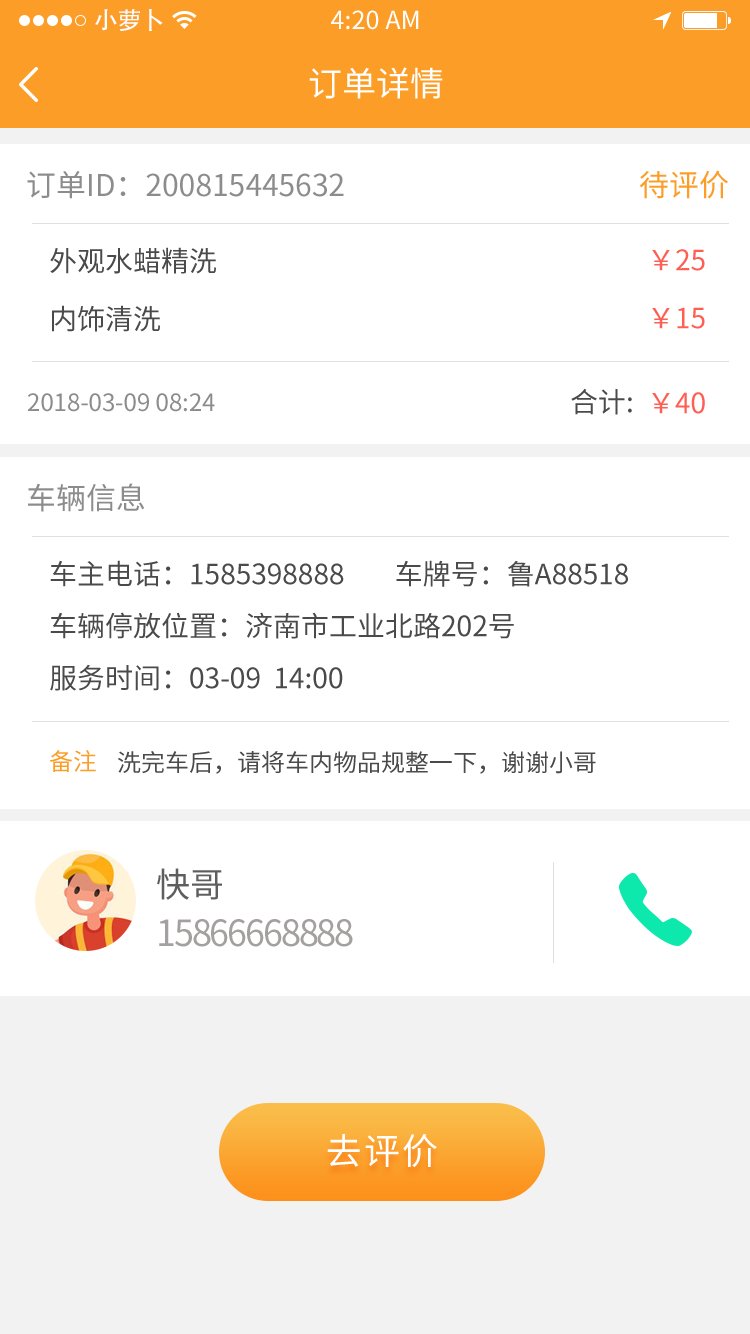
<style>
.page{position:relative;width:750px;height:1334px;background:#ffffff}
.page>*{position:absolute;margin:0}
.t1{font:24px "AdobeHeitiStd-Regular";color:#ffffff}
.t2{font:25px "SourceHanSansCN-Regular";color:#ffffff}
.t3{font:34px "SourceHanSansCN-Regular";color:#ffffff}
.t4{font:30px "SourceHanSansCN-Regular";color:#8c8c8c}
.t5{font:30px "SourceHanSansCN-Regular";color:#fb9d27}
.t6{font:28px/58px "SourceHanSansCN-Regular";color:#4a4a4a}
.t7{font:28px/58px "SourceHanSansCN-Regular";color:#ff5f52}
.t8{font:28px "SourceHanSansCN-Regular";color:#4a4a4a}
.t9{font:24px "SourceHanSansCN-Regular";color:#8c8c8c}
.t10{font:28px "SourceHanSansCN-Regular";color:#ff5f52}
.t11{font:28px/52px "SourceHanSansCN-Regular";color:#4a4a4a}
.t12{font:24px "SourceHanSansCN-Regular";color:#fb9d27}
.t13{font:24px "SourceHanSansCN-Regular";color:#4a4a4a}
.t14{font:34px "SourceHanSansCN-Regular";color:#5e5e5e}
.t15{font:36px "SourceHanSansCN-Regular";letter-spacing:-0.06em;color:#a5a0a0}
.t16{font:36px "SourceHanSansCN-Regular";letter-spacing:0.06em;color:#ffffff}
</style>
<div class="page">
<p class="t1" style="left:95px;top:9px;width:68px;height:22px">小萝卜</p>
<p class="t2" style="left:331px;top:10px;width:88px;height:20px">4:20 AM</p>
<p class="t3" style="left:309px;top:67px;width:134px;height:32px">订单详情</p>
<p class="t4" style="left:27px;top:171px;width:317px;height:28px">订单ID：200815445632</p>
<p class="t5" style="left:639px;top:170px;width:89px;height:29px">待评价</p>
<p class="t6" style="left:50px;top:247px;width:166px;height:85px">外观水蜡精洗<br>内饰清洗</p>
<p class="t7" style="left:652px;top:249px;width:53px;height:80px;text-align:right">￥25<br>￥15</p>
<p class="t8" style="left:571px;top:388px;width:61px;height:27px">合计:</p>
<p class="t9" style="left:28px;top:393px;width:187px;height:19px">2018-03-09 08:24</p>
<p class="t10" style="left:652px;top:392px;width:53px;height:22px">￥40</p>
<p class="t4" style="left:28px;top:483px;width:117px;height:29px">车辆信息</p>
<p class="t11" style="left:50px;top:560px;width:578px;height:131px">车主电话：1585398888        车牌号：鲁A88518<br>车辆停放位置：济南市工业北路202号<br>服务时间：03-09  14:00</p>
<p class="t12" style="left:50px;top:750px;width:46px;height:22px">备注</p>
<p class="t13" style="left:118px;top:751px;width:478px;height:23px">洗完车后，请将车内物品规整一下，谢谢小哥</p>
<p class="t14" style="left:157px;top:868px;width:65px;height:32px">快哥</p>
<p class="t15" style="left:159px;top:919px;width:194px;height:28px">15866668888</p>
<p class="t16" style="left:327px;top:1134px;width:110px;height:34px">去评价</p>
</div>
